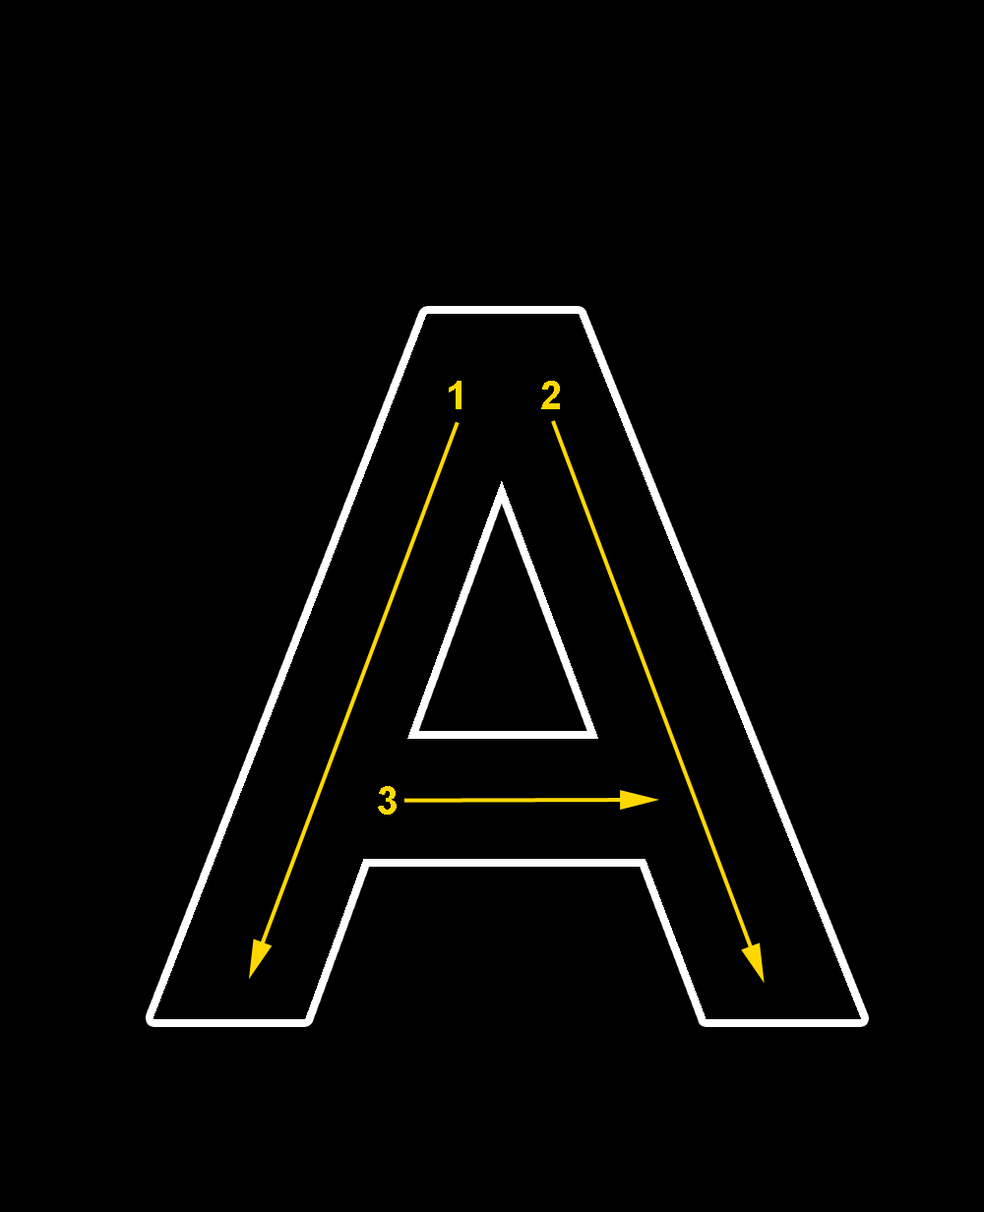
<style>
.page{position:relative;width:984px;height:1212px;background:#000000}
.page>*{position:absolute;margin:0}
.t1{font:39.4px "Arial-BoldMT";color:#ffd800}
</style>
<div class="page">
<p class="t1" style="left:449px;top:381px;width:111px;height:28px">1   2</p>
<p class="t1" style="left:378px;top:786px;width:18px;height:29px">3</p>
</div>
